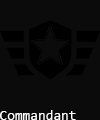
<style>
.page{position:relative;width:100px;height:120px;background:#0b0b0b}
.page>*{position:absolute;margin:0}
.t1{font:14px "Consolas";color:#ffffff}
</style>
<div class="page">
<p class="t1" style="left:0px;top:110px;width:76px;height:10px">Commandant</p>
</div>
